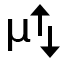
<style>
.page{position:relative;width:64px;height:64px;background:#ffffff}
.page>*{position:absolute;margin:0}
.t1{font:45px "Helvetica";color:#000000}
</style>
<div class="page">
<p class="t1" style="left:8px;top:19px;width:23px;height:32px">μ</p>
</div>
